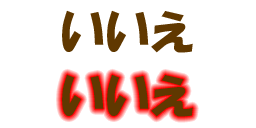
<style>
.page{position:relative;width:256px;height:128px;background:#ffffff}
.page>*{position:absolute;margin:0}
.t1{font:48px "HGPSoeiKakupoptai";letter-spacing:0.025em;color:#603800}
</style>
<div class="page">
<p class="t1" style="left:62px;top:10px;width:131px;height:43px">いいえ</p>
<p class="t1" style="left:62px;top:74px;width:131px;height:43px">いいえ</p>
</div>
